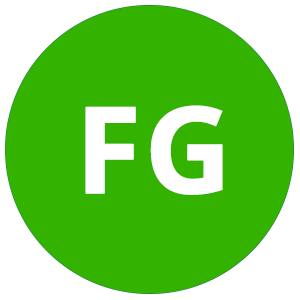
<style>
.page{position:relative;width:300px;height:300px;background:#33b300}
.page>*{position:absolute;margin:0}
.t1{font:119.9px "OpenSans-Bold";color:#ffffff;font-weight:bold}
</style>
<div class="page">
<p class="t1" style="left:85px;top:105px;width:138px;height:90px">FG</p>
</div>
